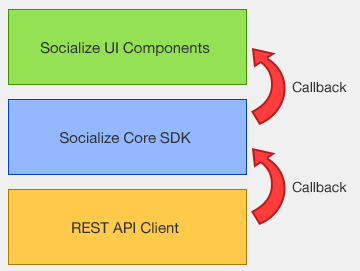
<style>
.page{position:relative;width:360px;height:271px;background:#f0f0f0}
.page>*{position:absolute;margin:0}
.t1{font:15px "HelveticaNeue";color:#313131}
.t2{font:14px "HelveticaNeue";color:#313131}
</style>
<div class="page">
<p class="t1" style="left:40px;top:42px;width:170px;height:14px">Socialize UI Components</p>
<p class="t2" style="left:292px;top:81px;width:55px;height:12px">Callback</p>
<p class="t1" style="left:60px;top:132px;width:131px;height:12px">Socialize Core SDK</p>
<p class="t2" style="left:292px;top:181px;width:55px;height:12px">Callback</p>
<p class="t1" style="left:72px;top:222px;width:107px;height:12px">REST API Client</p>
</div>
